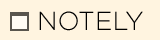
<style>
.page{position:relative;width:160px;height:40px;background:#fff4e0}
.page>*{position:absolute;margin:0}
.t1{font:26px "Gotham-Light";color:#000000}
</style>
<div class="page">
<p class="t1" style="left:39px;top:11px;width:104px;height:20px">NOTELY</p>
</div>
